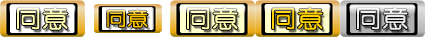
<style>
.page{position:relative;width:425px;height:37px}
.page>*{position:absolute;margin:0}
.t1{font:23.3px "YouYuan";color:#fffeb0;font-weight:bold;scale:1.14 1}
.t2{font:23.3px "YouYuan";color:#ffd100;font-weight:bold;scale:1.14 1}
.t3{font:23.3px "YouYuan";color:#eaeaea;font-weight:bold;scale:1.14 1}
.t4{font:18.6px "YouYuan";color:#ffc600;font-weight:bold;scale:1.14 1}
</style>
<div class="page">
<p class="t1" style="left:17px;top:6px;width:51px;height:24px">同意</p>
<p class="t1" style="left:187px;top:6px;width:51px;height:24px">同意</p>
<p class="t2" style="left:272px;top:6px;width:51px;height:24px">同意</p>
<p class="t3" style="left:357px;top:6px;width:51px;height:24px">同意</p>
<p class="t4" style="left:107px;top:9px;width:41px;height:19px">同意</p>
</div>
